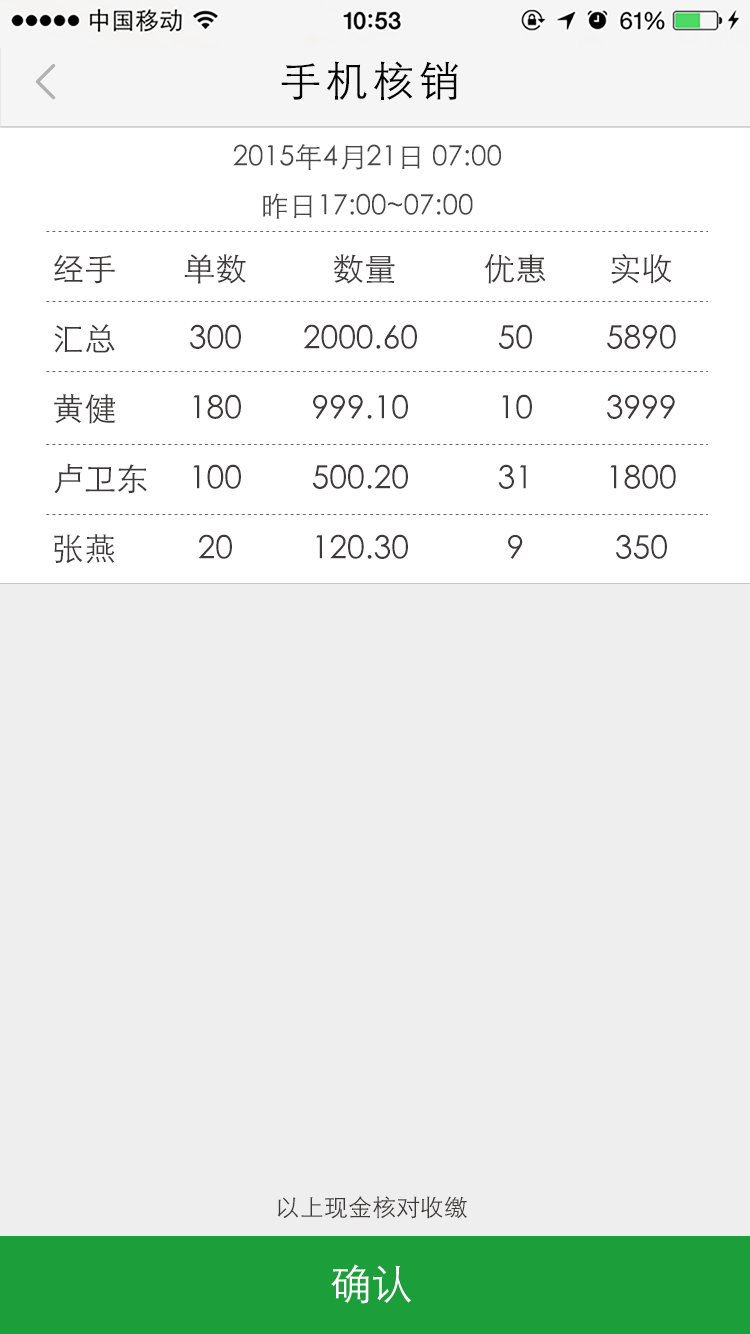
<style>
.page{position:relative;width:750px;height:1334px;background:#eeeeee}
.page>*{position:absolute;margin:0}
.t1{font:42px "STHeitiSC-Light";letter-spacing:0.1em;color:#000000}
.t2{font:28px "STHeitiSC-Light";color:#474747}
.t3{font:32px/70px "STHeitiSC-Light";color:#3e3a39}
.t4{font:24px "STHeitiSC-Light";color:#3e3a39}
.t5{font:42px "STHeitiSC-Light";color:#ffffff}
</style>
<div class="page">
<p class="t1" style="left:281px;top:61px;width:177px;height:39px">手机核销</p>
<p class="t2" style="left:233px;top:143px;width:268px;height:76px;text-align:center">2015年4月21日 07:00<br>昨日17:00~07:00</p>
<p class="t3" style="left:54px;top:254px;width:93px;height:310px">经手<br>汇总<br>黄健<br>卢卫东<br>张燕</p>
<p class="t3" style="left:184px;top:254px;width:62px;height:305px;text-align:center">单数<br>300<br>180<br>100<br>20</p>
<p class="t3" style="left:303px;top:254px;width:114px;height:305px;text-align:center">数量<br>2000.60<br>999.10<br>500.20<br>120.30</p>
<p class="t3" style="left:484px;top:253px;width:62px;height:306px;text-align:center">优惠<br>50<br>10<br>31<br>9</p>
<p class="t3" style="left:607px;top:253px;width:69px;height:306px;text-align:center">实收<br>5890<br>3999<br>1800<br>350</p>
<p class="t4" style="left:277px;top:1196px;width:190px;height:23px">以上现金核对收缴</p>
<p class="t5" style="left:331px;top:1264px;width:80px;height:40px">确认</p>
</div>
